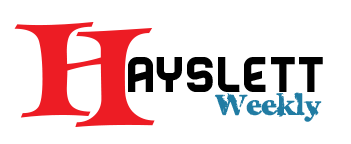
<style>
.page{position:relative;width:351px;height:144px;background:#ffffff}
.page>*{position:absolute;margin:0}
.t1{font:150px "LHFJesterExtended";color:#ed1c24}
.t2{font:58.3px "BenderSolid";color:#000000}
.t3{font:50px "CharlesS.";color:#217ca3}
</style>
<div class="page">
<p class="t1" style="left:14px;top:22px;width:141px;height:105px">H</p>
<p class="t2" style="left:128px;top:57px;width:195px;height:35px">ayslett</p>
<p class="t3" style="left:214px;top:92px;width:108px;height:30px">Weekly</p>
</div>
